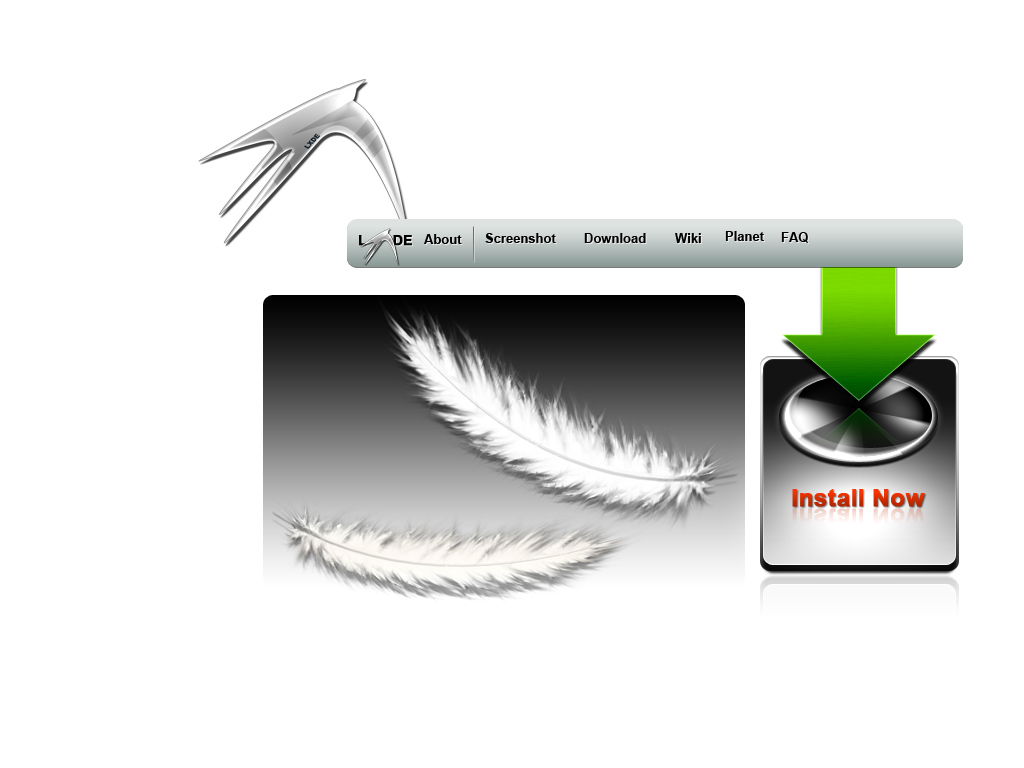
<style>
.page{position:relative;width:1024px;height:768px;background:#ffffff}
.page>*{position:absolute;margin:0}
.t1{font:13px "Arial-BoldMT";color:#000000}
.t2{font:14px "Arial-BoldMT";color:#000000;font-weight:bold}
.t3{font:24px "Arial-BoldMT";font-weight:bold}
</style>
<div class="page">
<p class="t1" style="left:485px;top:233px;width:71px;height:10px">Screenshot</p>
<p class="t1" style="left:584px;top:233px;width:62px;height:10px">Download</p>
<p class="t1" style="left:675px;top:233px;width:26px;height:10px">Wiki</p>
<p class="t1" style="left:725px;top:231px;width:39px;height:10px">Planet</p>
<p class="t1" style="left:781px;top:232px;width:27px;height:11px">FAQ</p>
<p class="t2" style="left:359px;top:235px;width:53px;height:11px">L      DE</p>
<p class="t1" style="left:424px;top:234px;width:38px;height:10px">About</p>
<p class="t3" style="left:792px;top:489px;width:133px;height:18px">Install Now</p>
</div>
